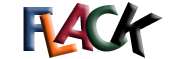
<style>
.page{position:relative;width:177px;height:59px;background:#ffffff}
.page>*{position:absolute;margin:0}
.t1{font:60px "Tahoma-Bold"}
.t2{font:60px "Tahoma-Bold";color:#000000}
</style>
<div class="page">
<p class="t1" style="left:52px;top:3px;width:42px;height:49px;rotate:13deg">A</p>
<p class="t1" style="left:85px;top:5px;width:43px;height:47px;rotate:-21deg">C</p>
<p class="t2" style="left:110px;top:2px;width:53px;height:56px;rotate:25deg">K</p>
<p class="t1" style="left:23px;top:7px;width:30px;height:44px">F</p>
<p class="t1" style="left:39px;top:13px;width:39px;height:45px;rotate:-14deg">L</p>
</div>
